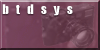
<style>
.page{position:relative;width:100px;height:50px}
.page>*{position:absolute;margin:0}
.t1{font:12.3px "Impact";letter-spacing:0.5em;color:#ffffff;scale:1.09 1}
</style>
<div class="page">
<p class="t1" style="left:2px;top:4px;width:71px;height:12px">btdsys</p>
</div>
